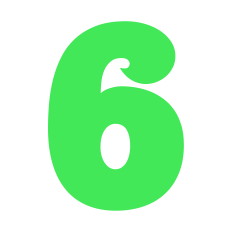
<style>
.page{position:relative;width:236px;height:236px;background:#ffffff}
.page>*{position:absolute;margin:0}
.t1{font:250px "SpicyRice-Regular";color:#43e858}
</style>
<div class="page">
<p class="t1" style="left:48px;top:21px;width:136px;height:190px">6</p>
</div>
